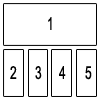
<style>
.page{position:relative;width:100px;height:100px;background:#ffffff}
.page>*{position:absolute;margin:0}
.t1{font:18px "ArialMT";color:#010101;scale:0.67 1}
</style>
<div class="page">
<p class="t1" style="left:48px;top:17px;width:4px;height:13px">1</p>
<p class="t1" style="left:10px;top:66px;width:7px;height:13px">2</p>
<p class="t1" style="left:35px;top:66px;width:7px;height:14px">3</p>
<p class="t1" style="left:59px;top:66px;width:7px;height:13px">4</p>
<p class="t1" style="left:85px;top:66px;width:7px;height:14px">5</p>
</div>
